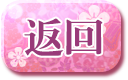
<style>
.page{position:relative;width:128px;height:80px}
.page>*{position:absolute;margin:0}
.t1{font:40px "FZXBSK--GBK1-0";letter-spacing:-0.03em;color:#993a79;font-weight:bold}
</style>
<div class="page">
<p class="t1" style="left:24px;top:18px;width:79px;height:38px">返回</p>
</div>
